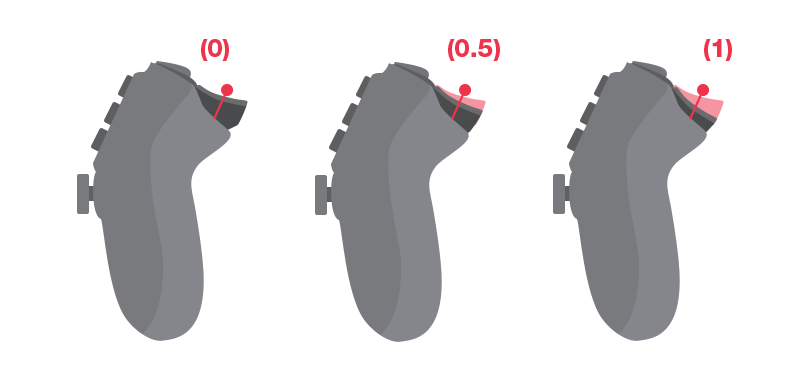
<style>
.page{position:relative;width:800px;height:379px;background:#ffffff}
.page>*{position:absolute;margin:0}
.t1{font:25px "HelveticaNeueCyr-Black";color:#ed344c}
</style>
<div class="page">
<p class="t1" style="left:201px;top:39px;width:28px;height:22px">(0)</p>
<p class="t1" style="left:448px;top:39px;width:52px;height:22px">(0.5)</p>
<p class="t1" style="left:704px;top:39px;width:28px;height:22px">(1)</p>
</div>
